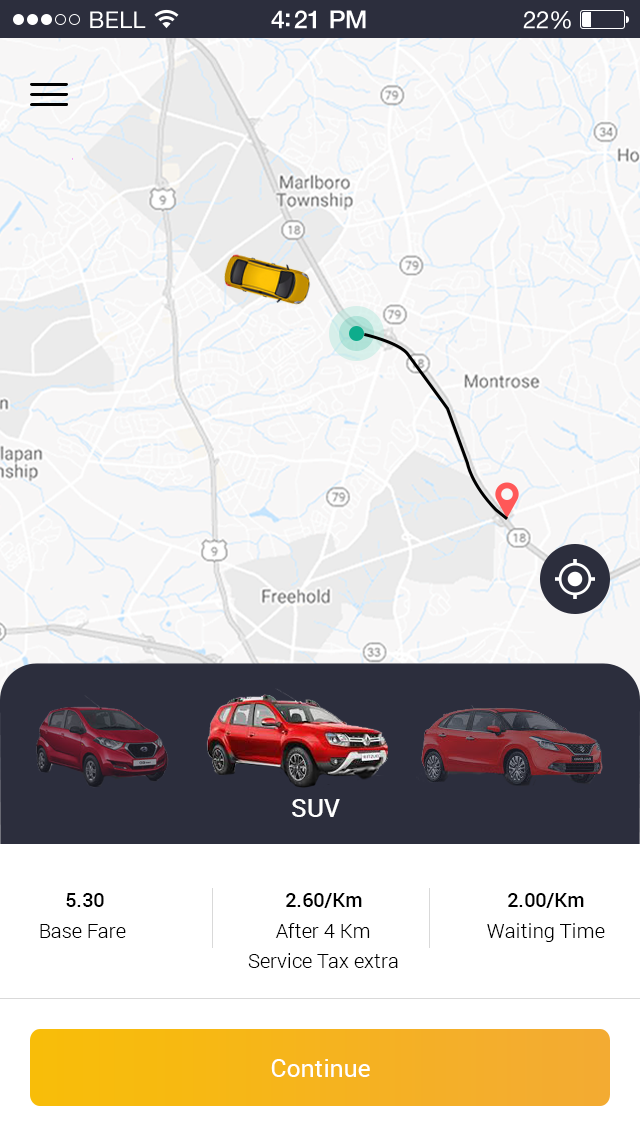
<style>
.page{position:relative;width:640px;height:1136px;background:#f7f6f6}
.page>*{position:absolute;margin:0}
.t1{font:25px "Roboto-Medium";color:#ffffff}
.t2{font:20px "Roboto-Medium";color:#000000}
.t3{font:20px "Roboto-Light";color:#000000}
.t4{font:25px "Roboto-Regular";color:#ffffff}
</style>
<div class="page">
<p class="t1" style="left:292px;top:799px;width:48px;height:18px">SUV</p>
<p class="t2" style="left:66px;top:893px;width:38px;height:14px">₹ 5.30</p>
<p class="t2" style="left:286px;top:893px;width:76px;height:15px">₹ 2.60/Km</p>
<p class="t2" style="left:508px;top:893px;width:76px;height:15px">₹ 2.00/Km</p>
<p class="t3" style="left:40px;top:924px;width:86px;height:14px">Base Fare</p>
<p class="t3" style="left:275px;top:923px;width:95px;height:15px">After 4 Km</p>
<p class="t3" style="left:487px;top:923px;width:118px;height:19px">Waiting Time</p>
<p class="t3" style="left:248px;top:953px;width:150px;height:15px">Service Tax extra</p>
<p class="t4" style="left:271px;top:1059px;width:99px;height:18px">Continue</p>
</div>
